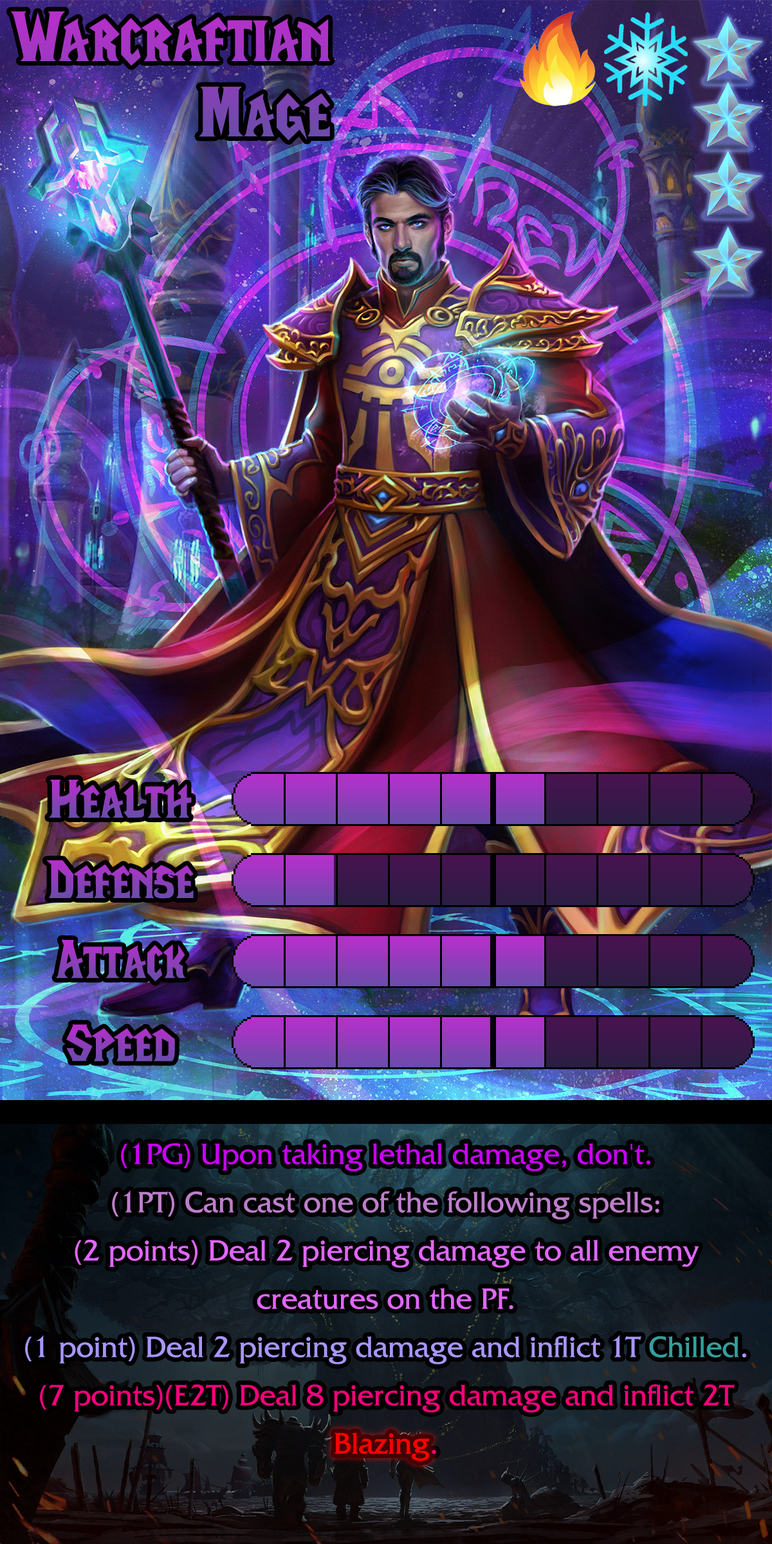
<style>
.page{position:relative;width:772px;height:1544px}
.page>*{position:absolute;margin:0}
.t1{font:121.6px/75.3px "LifeCraft"}
.t2{font:92.7px "LifeCraft"}
.t3{font:52.8px/48.3px "FrizQuadrataStd";color:#e166ff}
.t4{font:52.8px/48.3px "FrizQuadrataStd";color:#c800f8}
.t5{font:52.8px/48.3px "FrizQuadrataStd";color:#bd7ecc}
.t6{font:52.8px/48.3px "FrizQuadrataStd";color:#a796ff}
.t7{font:52.8px/48.3px "FrizQuadrataStd";color:#359e9d}
.t8{font:52.8px/48.3px "FrizQuadrataStd";color:#f8007b}
.t9{font:52.8px/48.3px "FrizQuadrataStd";color:#ff0000}
.t10{font:52.8px "FrizQuadrataStd";color:#ff0000}
</style>
<div class="page">
<p class="t1" style="left:10px;top:11px;width:321px;height:129px">Warcraftian <br>             Mage</p>
<p class="t2" style="left:49px;top:780px;width:143px;height:38px">Health</p>
<p class="t2" style="left:46px;top:860px;width:148px;height:39px">Defense</p>
<p class="t2" style="left:56px;top:939px;width:130px;height:43px">Attack</p>
<p class="t2" style="left:66px;top:1024px;width:109px;height:38px">Speed</p>
<p class="t3" style="left:25px;top:1142px;width:721px;height:319px;text-align:center"><span class="t4">(1PG) Upon taking lethal damage, don't.<br></span><span class="t5">(1PT) Can cast one of the following spells:<br></span>(2 points) Deal 2 piercing damage to all enemy creatures on the PF.<br><span class="t6">(1 point) Deal 2 piercing damage and inflict 1T </span><span class="t7">Chilled</span><span class="t6">.<br></span><span class="t8">(7 points)(E2T) Deal 8 piercing damage and inflict 2T </span><span class="t9">Blazing</span><span class="t8">.</span></p>
<p class="t10" style="left:335px;top:1433px;width:95px;height:28px">Blazing</p>
</div>
